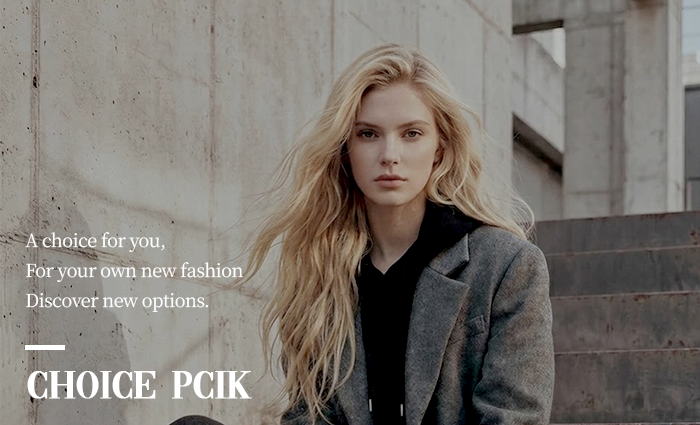
<style>
.page{position:relative;width:700px;height:425px}
.page>*{position:absolute;margin:0}
.t1{font:18px/30px "NotoSerifKR-Regular";letter-spacing:-0.025em;color:#ffffff;font-weight:bold}
.t2{font:40px "Vogue-Regular";letter-spacing:-0.025em;color:#ffffff;font-weight:bold}
</style>
<div class="page">
<p class="t1" style="left:25px;top:232px;width:218px;height:80px">A choice for you,<br>For your own new fashion<br>Discover new options.</p>
<p class="t2" style="left:27px;top:371px;width:225px;height:28px">Choice Pcik</p>
</div>
